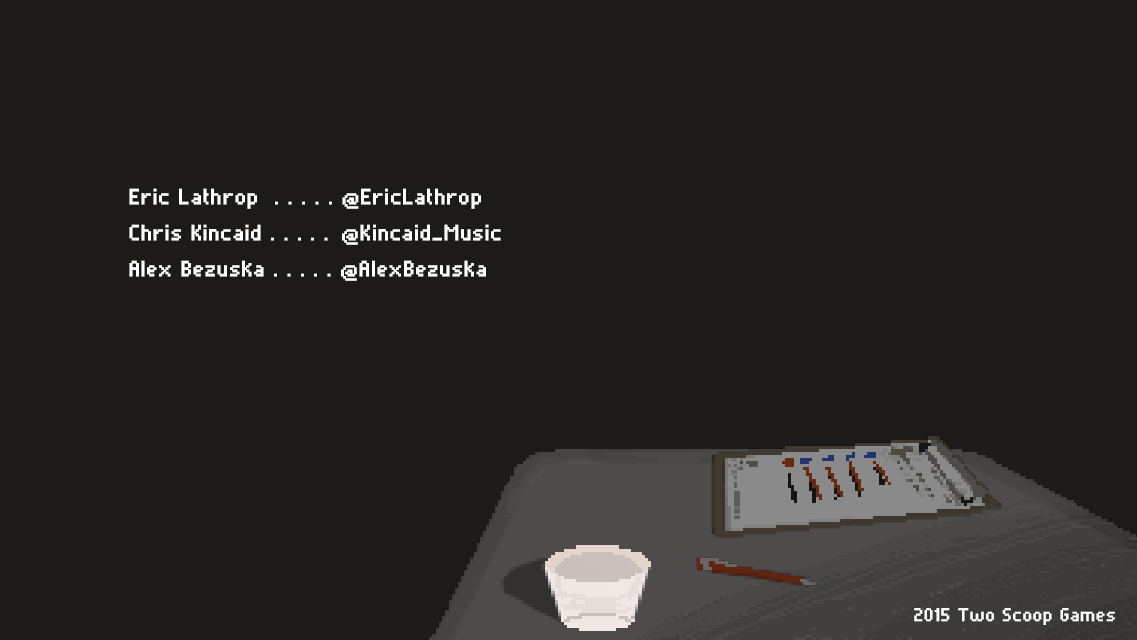
<style>
.page{position:relative;width:1137px;height:640px;background:#1c1b19}
.page>*{position:absolute;margin:0}
.t1{font:28.3px/36.4px "Pixelade";letter-spacing:0.02em;color:#ffffff;font-weight:bold}
.t2{font:28.3px/36.4px "Pixelade";letter-spacing:0.08em;color:#ffffff;font-weight:bold;scale:1.03 1}
.t3{font:24px "Pixelade";letter-spacing:0.02em;color:#ffffff;font-weight:bold}
</style>
<div class="page">
<p class="t1" style="left:129px;top:188px;width:372px;height:93px">Eric Lathrop  . . . . . @EricLathrop<br>Chris Kincaid . . . . <span class="t2">. </span>@Kincaid_Music<br>Alex Bezuska . . . . . @AlexBezuska</p>
<p class="t3" style="left:914px;top:608px;width:201px;height:17px">2015 Two Scoop Games</p>
</div>
